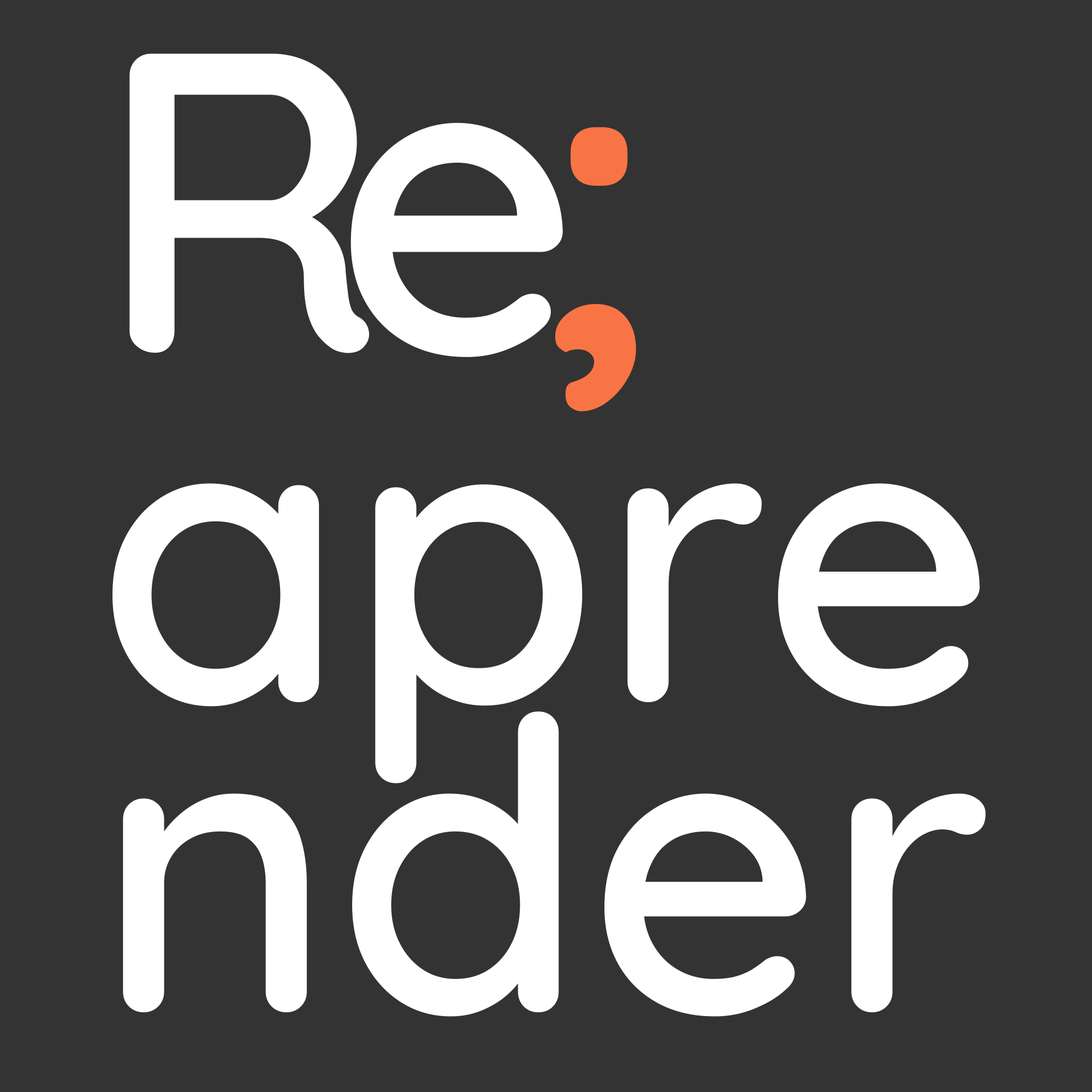
<style>
.page{position:relative;width:1092px;height:1092px;background:#333333}
.page>*{position:absolute;margin:0}
.t1{font:406.4px/349.3px "Quicksand-SemiBold";color:#ffffff}
.t2{font:427.1px "Quicksand-SemiBold";letter-spacing:-0.12em;color:#ffffff}
.t3{font:427.1px "Quicksand-Bold";letter-spacing:0.06em;color:#f97444}
.t4{font:406.4px/310.4px "Quicksand-SemiBold";color:#ffffff}
</style>
<div class="page">
<p class="t1" style="left:112px;top:54px;width:874px;height:963px"><span class="t2">Re</span><span class="t3">;<br></span>apre<br><span class="t4">nder</span></p>
</div>
